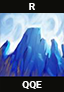
<style>
.page{position:relative;width:64px;height:92px;background:#0d0d0a}
.page>*{position:absolute;margin:0}
.t1{font:10px "Roboto-Bold";color:#fcfcfc}
</style>
<div class="page">
<p class="t1" style="left:29px;top:3px;width:6px;height:7px">R</p>
<p class="t1" style="left:22px;top:81px;width:20px;height:8px">QQE</p>
</div>
